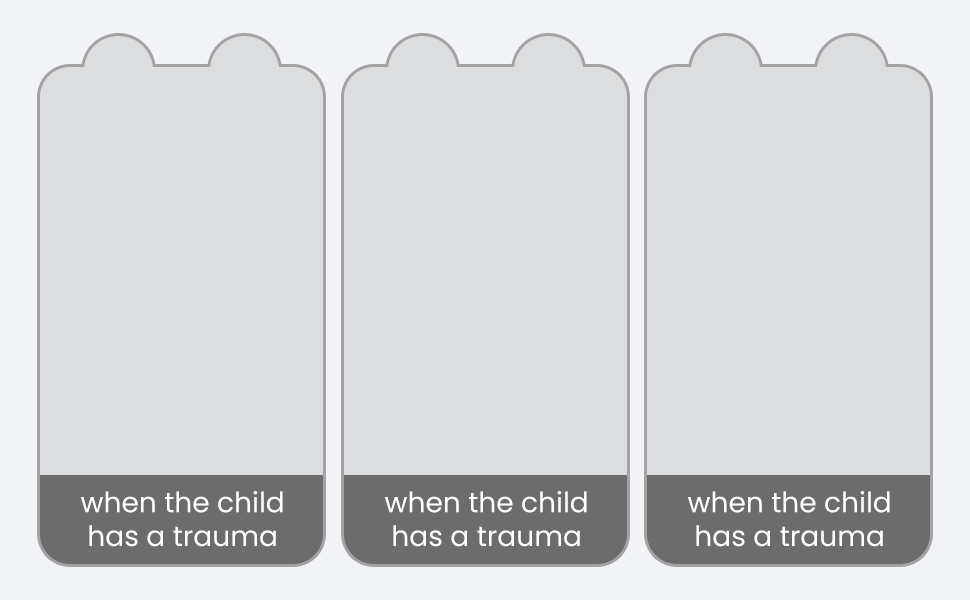
<style>
.page{position:relative;width:970px;height:600px;background:#dcdddf}
.page>*{position:absolute;margin:0}
.t1{font:28px "Poppins-Regular";color:#ffffff}
</style>
<div class="page">
<p class="t1" style="left:81px;top:491px;width:202px;height:56px;text-align:center">when the child<br>has a trauma</p>
<p class="t1" style="left:385px;top:491px;width:202px;height:56px;text-align:center">when the child<br>has a trauma</p>
<p class="t1" style="left:688px;top:491px;width:202px;height:56px;text-align:center">when the child<br>has a trauma</p>
</div>
